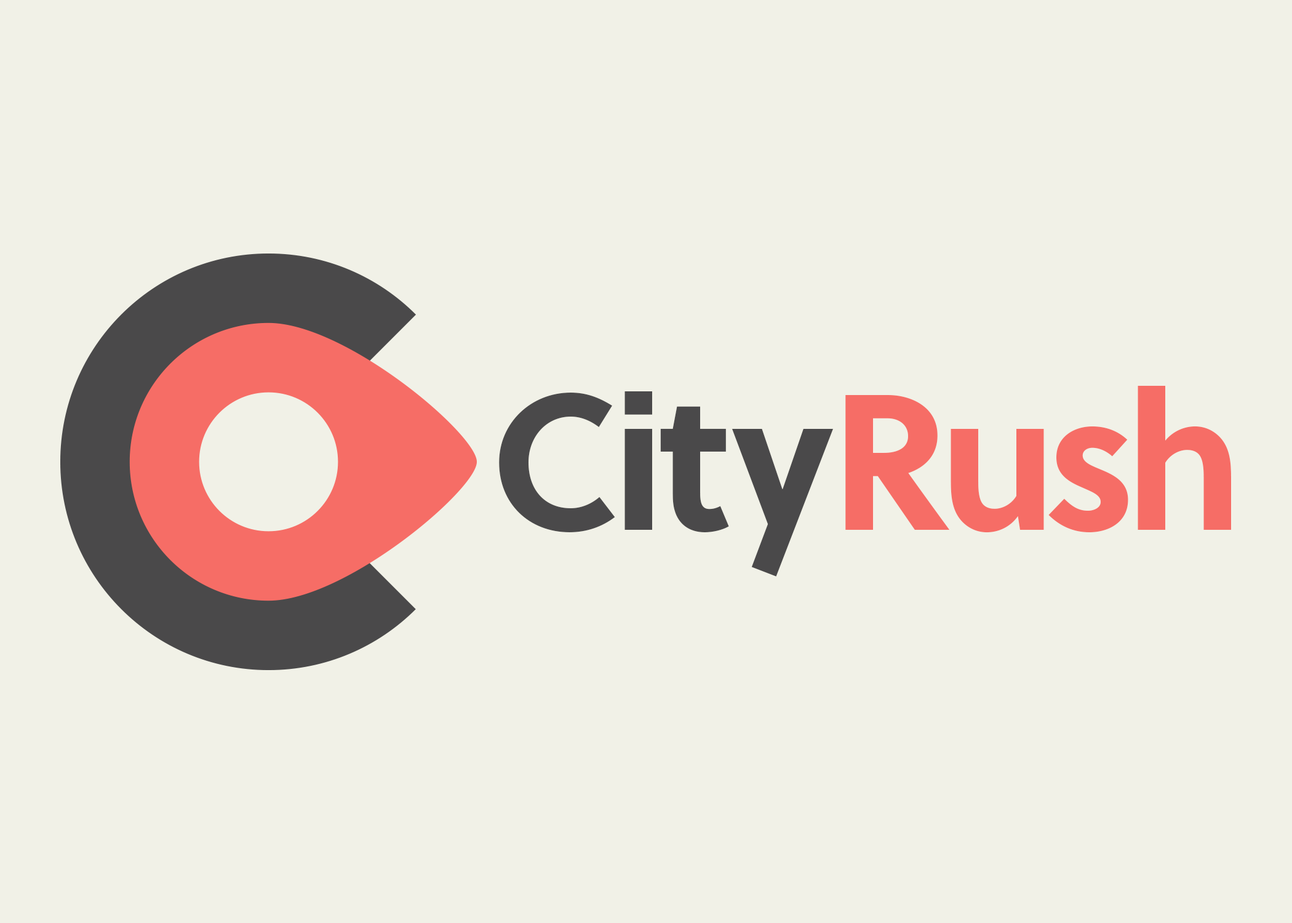
<style>
.page{position:relative;width:1292px;height:923px;background:#f1f1e7}
.page>*{position:absolute;margin:0}
.t1{font:192.3px "Soleil-Bold";letter-spacing:-0.04em;color:#f66d66}
.t2{font:192.3px "Soleil-Bold";letter-spacing:-0.02em;color:#4a494a}
.t3{font:192.3px "Soleil-Bold";color:#4a494a}
</style>
<div class="page">
<p class="t1" style="left:499px;top:386px;width:732px;height:191px"><span class="t2">Ci</span><span class="t3">ty</span>Rush</p>
</div>
